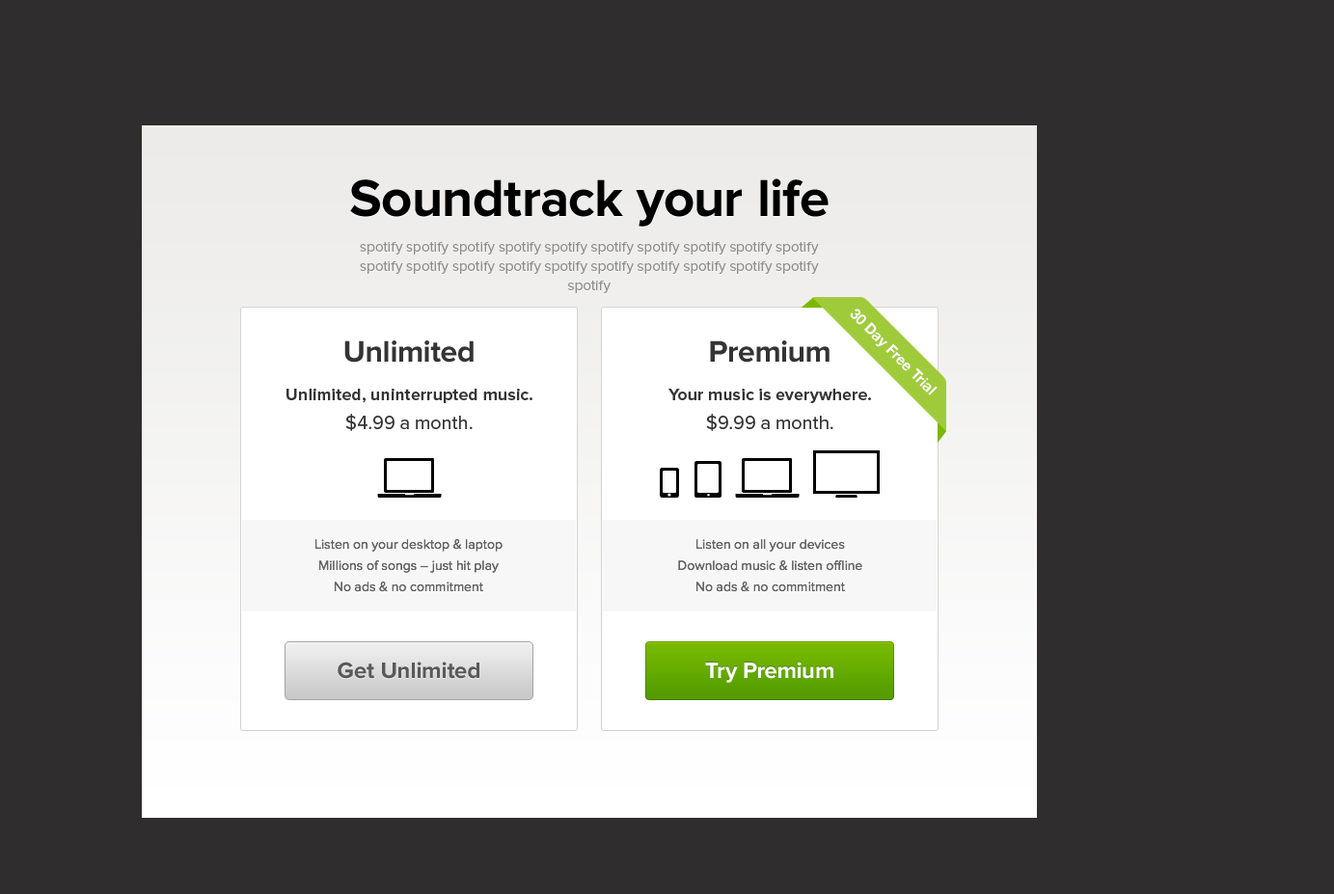
<style>
.page{position:relative;width:1334px;height:894px;background:#2f2d2d}
.page>*{position:absolute;margin:0}
.t1{font:54px "ProximaNova-Bold";color:#000000}
.t2{font:14.5px/19.3px "ProximaNova-Regular";color:#8d8d8d}
.t3{font:30.9px "ProximaNova-Bold";color:#343434}
.t4{font:17.4px/28.9px "ProximaNova-Bold";color:#343434}
.t5{font:19.3px/28.9px "ProximaNova-Regular";color:#343434}
.t6{font:13.5px/21.2px "ProximaNova-Regular";color:#646464}
.t7{font:23.1px "ProximaNova-Bold";color:#595959}
.t8{font:23.1px "ProximaNova-Bold";color:#ffffff}
</style>
<div class="page">
<p class="t1" style="left:350px;top:178px;width:478px;height:49px">Soundtrack your life</p>
<p class="t2" style="left:360px;top:241px;width:459px;height:52px;text-align:center">spotify spotify spotify spotify spotify spotify spotify spotify spotify spotify spotify spotify spotify spotify spotify spotify spotify spotify spotify spotify spotify</p>
<p class="t3" style="left:344px;top:340px;width:130px;height:23px">Unlimited</p>
<p class="t3" style="left:710px;top:340px;width:119px;height:23px">Premium</p>
<p class="t4" style="left:286px;top:389px;width:246px;height:42px;text-align:center">Unlimited, uninterrupted music.<br><span class="t5">$4.99 a month.</span></p>
<p class="t4" style="left:668px;top:389px;width:203px;height:42px;text-align:center">Your music is everywhere.  <br><span class="t5">$9.99 a month.</span></p>
<p class="t6" style="left:314px;top:539px;width:188px;height:53px;text-align:center">Listen on your desktop &amp; laptop<br>Millions of songs – just hit play<br>No ads &amp; no commitment</p>
<p class="t6" style="left:678px;top:539px;width:184px;height:53px;text-align:center">Listen on all your devices<br>Download music &amp; listen offline<br>No ads &amp; no commitment</p>
<p class="t7" style="left:338px;top:662px;width:141px;height:17px">Get Unlimited</p>
<p class="t8" style="left:705px;top:662px;width:128px;height:21px">Try Premium</p>
</div>
